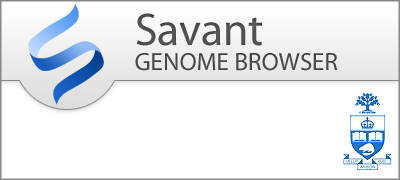
<style>
.page{position:relative;width:400px;height:180px;background:#ffffff}
.page>*{position:absolute;margin:0}
.t1{font:25px/20.8px "MyriadPro-Regular";color:#4b4949;text-transform:uppercase}
.t2{font:45.8px/20.8px "MyriadPro-Regular";color:#4b4949}
</style>
<div class="page">
<p class="t1" style="left:135px;top:13px;width:203px;height:58px"><span class="t2">Savant<br></span>Genome Browser</p>
</div>
